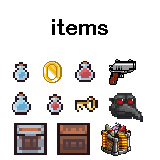
<style>
.page{position:relative;width:160px;height:160px;background:#ffffff}
.page>*{position:absolute;margin:0}
.t1{font:22px "ArialRoundedMTBold";color:#000000}
</style>
<div class="page">
<p class="t1" style="left:52px;top:19px;width:56px;height:16px">items</p>
</div>
